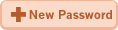
<style>
.page{position:relative;width:118px;height:30px;background:#fadbca}
.page>*{position:absolute;margin:0}
.t1{font:12px "NewsGothic-Bold";color:#b85b2a}
</style>
<div class="page">
<p class="t1" style="left:29px;top:10px;width:83px;height:9px">New Password</p>
</div>
